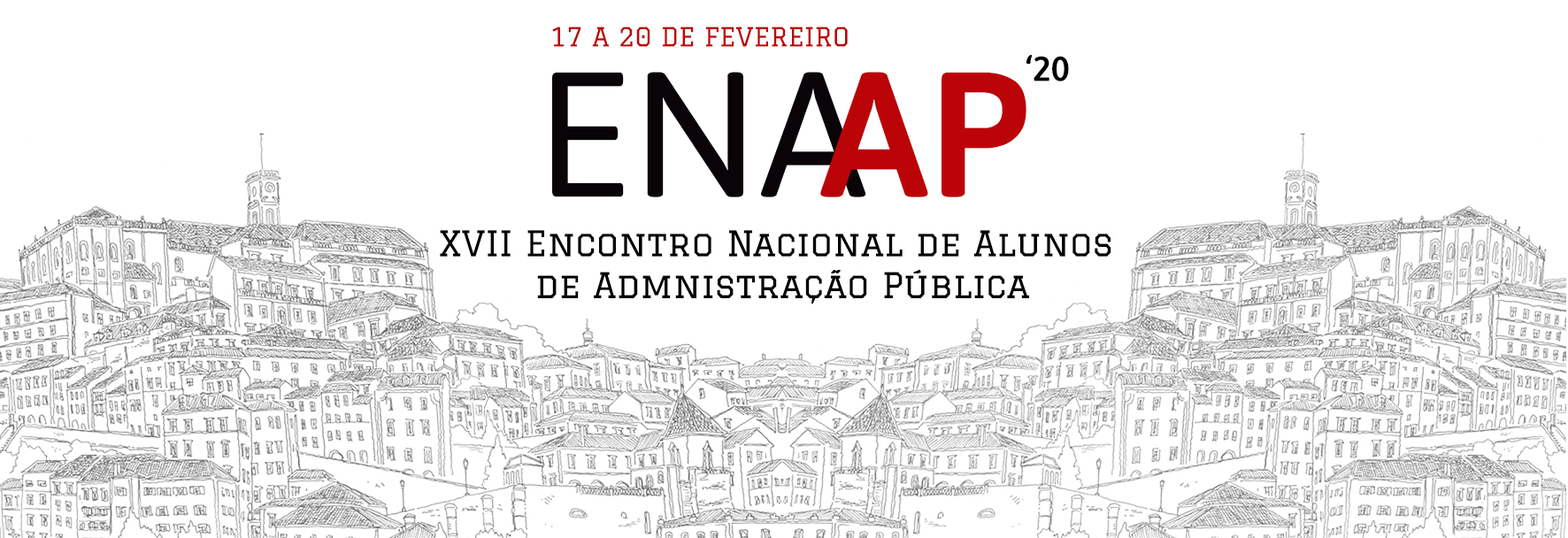
<style>
.page{position:relative;width:1568px;height:538px;background:#ffffff}
.page>*{position:absolute;margin:0}
.t1{font:25.8px "Graduate-Regular";color:#bb0705}
.t2{font:34.8px "Asap-SemiBold";color:#010000}
.t3{font:177.1px "Asap-Regular";color:#080408}
.t4{font:177.1px "Asap-SemiBold";color:#bb0408}
.t5{font:34.8px "Graduate-Regular";color:#000000}
</style>
<div class="page">
<p class="t1" style="left:552px;top:27px;width:296px;height:20px">17 A 20 DE FEVEREIRO</p>
<p class="t2" style="left:1026px;top:55px;width:43px;height:26px">‘20</p>
<p class="t3" style="left:552px;top:72px;width:314px;height:125px">ENA</p>
<p class="t4" style="left:820px;top:72px;width:206px;height:125px">AP</p>
<p class="t5" style="left:440px;top:230px;width:671px;height:74px;text-align:center">XVII Encontro Nacional de Alunos <br>de Admnistração Pública</p>
</div>
